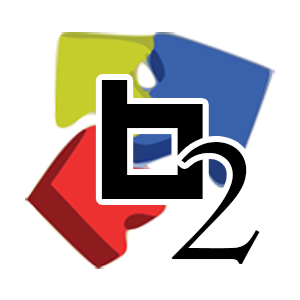
<style>
.page{position:relative;width:300px;height:300px;background:#ffffff}
.page>*{position:absolute;margin:0}
.t1{font:118.8px "HappyKiller";color:#000000;scale:1.06 1}
.t2{font:186.5px "Centaur";color:#000000}
</style>
<div class="page">
<p class="t1" style="left:101px;top:80px;width:102px;height:119px">b</p>
<p class="t2" style="left:171px;top:142px;width:89px;height:122px">2</p>
</div>
